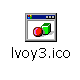
<style>
.page{position:relative;width:80px;height:80px;background:#ffffff}
.page>*{position:absolute;margin:0}
.t1{font:14px "MSReferenceSansSerif";color:#000000}
</style>
<div class="page">
<p class="t1" style="left:12px;top:47px;width:58px;height:14px">lvoy3.ico</p>
</div>
